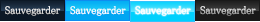
<style>
.page{position:relative;width:260px;height:22px}
.page>*{position:absolute;margin:0}
.t1{font:11px "MS-PMincho";color:#e4e4e4}
.t2{font:11px "MS-PMincho";color:#ffffff}
.t3{font:11px "MS-PMincho";color:#c0c0c0}
</style>
<div class="page">
<p class="t1" style="left:5px;top:6px;width:56px;height:10px">Sauvegarder</p>
<p class="t2" style="left:70px;top:6px;width:56px;height:10px">Sauvegarder</p>
<p class="t2" style="left:135px;top:6px;width:56px;height:10px">Sauvegarder</p>
<p class="t3" style="left:200px;top:6px;width:56px;height:10px">Sauvegarder</p>
</div>
